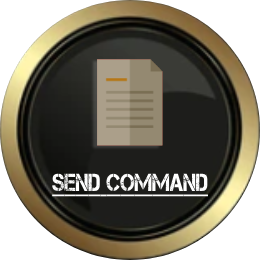
<style>
.page{position:relative;width:260px;height:260px;background:#ffffff}
.page>*{position:absolute;margin:0}
.t1{font:24.7px "Captureit";color:#ffffff;text-decoration:underline;scale:0.84 1}
</style>
<div class="page">
<p class="t1" style="left:52px;top:173px;width:156px;height:24px">Send Command</p>
</div>
